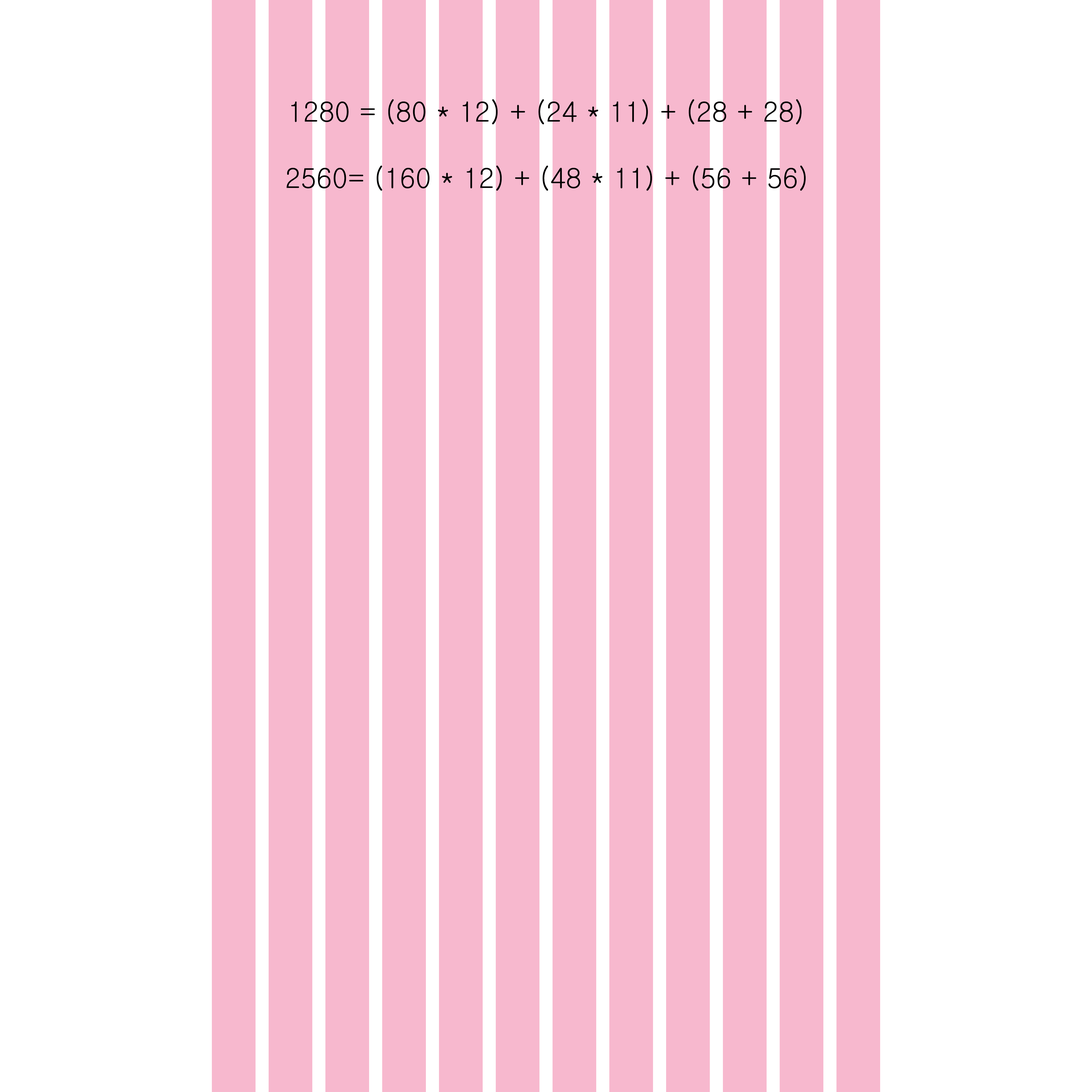
<style>
.page{position:relative;width:1092px;height:1092px;background:#ffffff}
.page>*{position:absolute;margin:0}
.t1{font:27.3px "Gulim";color:#000000}
</style>
<div class="page">
<p class="t1" style="left:291px;top:99px;width:511px;height:25px">1280 = (80 * 12) + (24 * 11) + (28 + 28)</p>
<p class="t1" style="left:287px;top:165px;width:519px;height:26px">2560= (160 * 12) + (48 * 11) + (56 + 56)</p>
</div>
